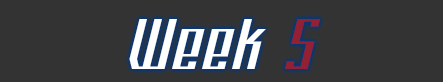
<style>
.page{position:relative;width:443px;height:82px;background:#333333}
.page>*{position:absolute;margin:0}
.t1{font:80px "PlatformEight";color:#ffffff}
.t2{font:80px "PlatformEight";color:#932033}
</style>
<div class="page">
<p class="t1" style="left:129px;top:19px;width:191px;height:50px">Week <span class="t2">5</span></p>
</div>
